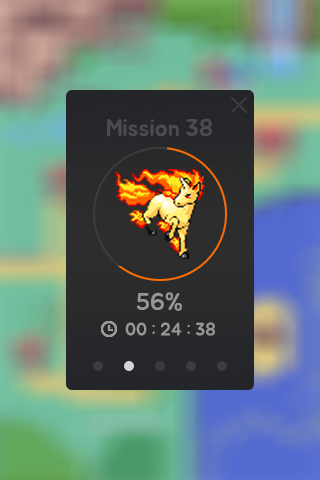
<style>
.page{position:relative;width:320px;height:480px}
.page>*{position:absolute;margin:0}
.t1{font:24px "BMJUA";color:#4b4c4e}
.t2{font:24px "BMJUA";color:#969797}
.t3{font:18px "BMJUA";color:#969797}
</style>
<div class="page">
<p class="t1" style="left:107px;top:118px;width:105px;height:19px">Mission 38</p>
<p class="t2" style="left:137px;top:292px;width:45px;height:19px">56%</p>
<p class="t3" style="left:125px;top:322px;width:90px;height:14px">00 : 24 : 38</p>
</div>
